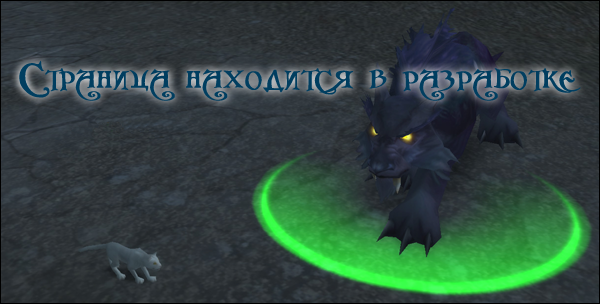
<style>
.page{position:relative;width:600px;height:304px}
.page>*{position:absolute;margin:0}
.t1{font:33px "AzerothCyrillic";letter-spacing:0.025em;color:#003e60;font-variant:small-caps;font-weight:bold}
</style>
<div class="page">
<p class="t1" style="left:19px;top:60px;width:562px;height:41px">Страница находится в разработке</p>
</div>
